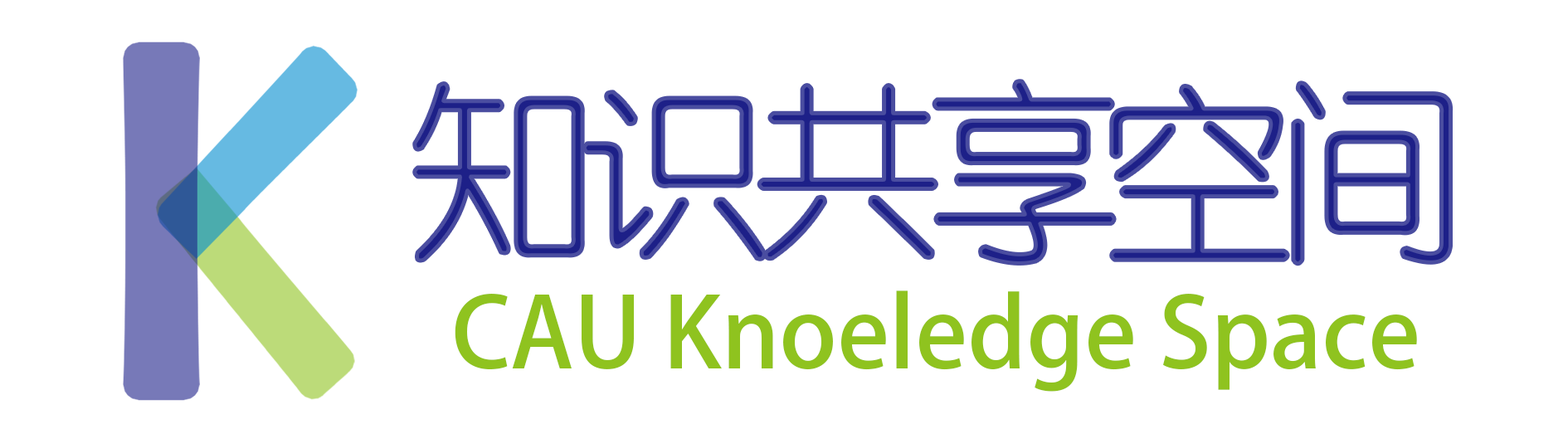
<style>
.page{position:relative;width:1568px;height:429px;background:#ffffff}
.page>*{position:absolute;margin:0}
.t1{font:193.6px "YouYuan";letter-spacing:-0.1em}
.t2{font:96.8px "AdobeHeitiStd-Regular";color:#8fc31f}
</style>
<div class="page">
<p class="t1" style="left:414px;top:80px;width:1037px;height:184px">知识共享空间</p>
<p class="t2" style="left:455px;top:290px;width:962px;height:102px">CAU Knoeledge Space</p>
</div>
